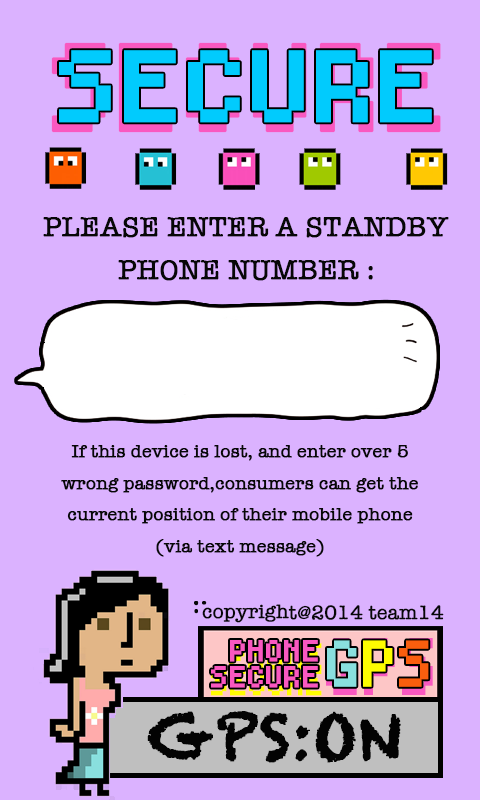
<style>
.page{position:relative;width:480px;height:800px;background:#dbb2ff}
.page>*{position:absolute;margin:0}
.t1{font:116px "Mouse";font-weight:bold;scale:0.89 1}
.t2{font:94.3px "Mouse";color:#01cbfd;font-weight:bold;scale:1.04 1}
.t3{font:28px "AmericanTypewriter";color:#070707;font-weight:bold}
.t4{font:18px "AmericanTypewriter";color:#070707;font-weight:bold}
.t5{font:20px "AmericanTypewriter";color:#070707;font-weight:bold}
.t6{font:28px "Mouse";color:#f958c0;font-weight:bold}
.t7{font:60.7px "Mouse";color:#89dfde;font-weight:bold;scale:0.92 1}
.t8{font:60.7px "Mouse";color:#fdfc01;font-weight:bold;scale:0.92 1}
.t9{font:60.7px "Mouse";color:#f95e0e;font-weight:bold;scale:0.92 1}
.t10{font:34.4px "Mouse";font-weight:bold;scale:0.85 1}
.t11{font:60px "Chalkduster";color:#030303;font-weight:bold}
</style>
<div class="page">
<p class="t1" style="left:51px;top:42px;width:390px;height:91px">SECURE</p>
<p class="t2" style="left:59px;top:50px;width:373px;height:73px">SECURE</p>
<p class="t3" style="left:43px;top:217px;width:406px;height:21px">PLEASE ENTER A STANDBY</p>
<p class="t3" style="left:118px;top:260px;width:255px;height:21px">PHONE NUMBER :</p>
<p class="t4" style="left:61px;top:445px;width:357px;height:112px;text-align:center">If this device is lost, and enter over 5 wrong password,consumers can get the current position of their mobile phone <br>(via text message)</p>
<p class="t5" style="left:202px;top:604px;width:242px;height:19px">copyright@2014 team14</p>
<p class="t6" style="left:230px;top:640px;width:88px;height:22px">PHONE</p>
<p class="t7" style="left:327px;top:640px;width:102px;height:47px">G<span class="t8">P</span><span class="t9">S</span></p>
<p class="t10" style="left:211px;top:669px;width:111px;height:27px">SECURE</p>
<p class="t6" style="left:211px;top:666px;width:107px;height:22px">SECURE</p>
<p class="t11" style="left:147px;top:711px;width:254px;height:52px">GPS:ON</p>
</div>
